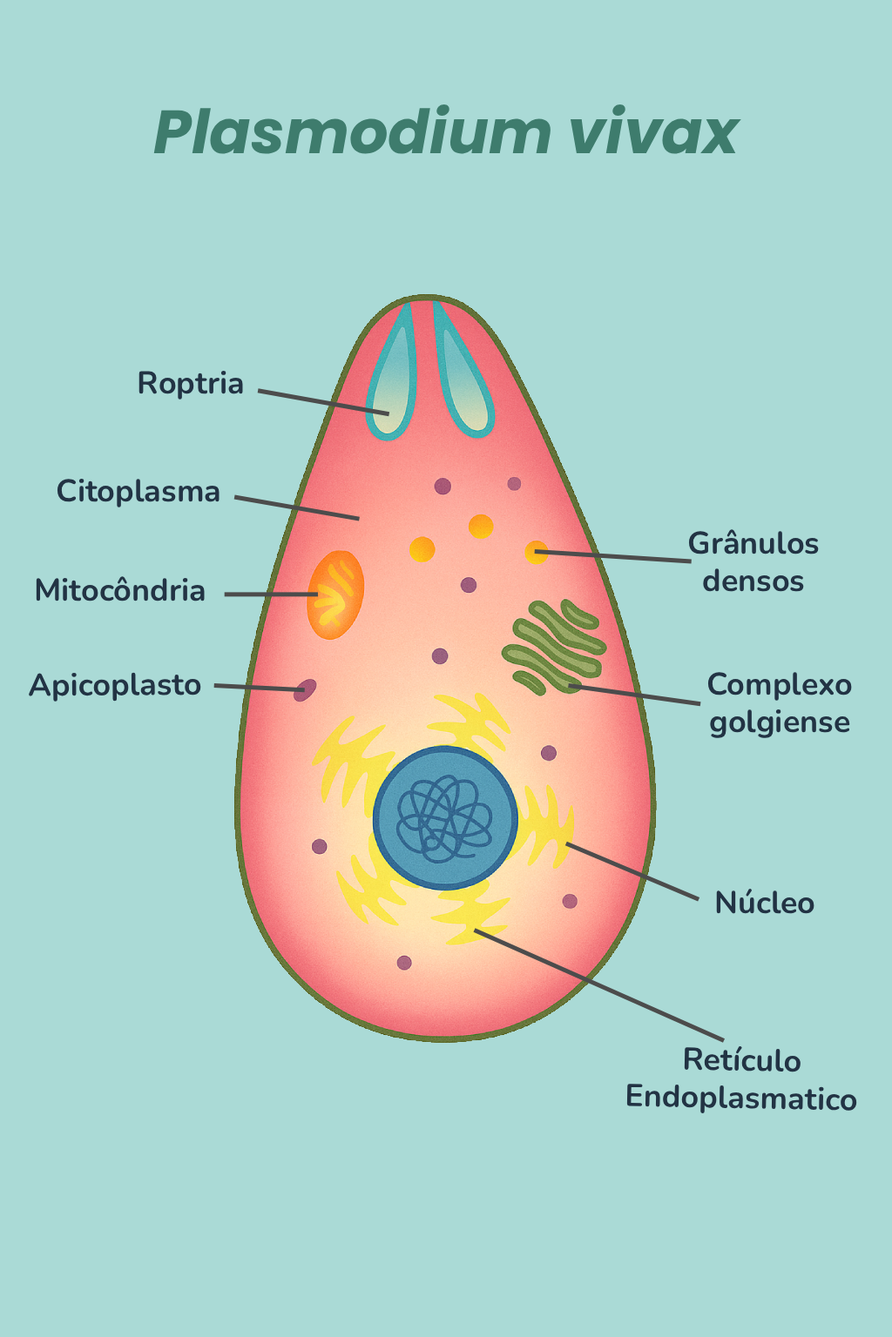
<style>
.page{position:relative;width:892px;height:1337px;background:#aadad6}
.page>*{position:absolute;margin:0}
.t1{font:60.9px "Poppins-BoldItalic";color:#3e7c6d}
.t2{font:31.3px "Nunito-Bold";color:#223344}
</style>
<div class="page">
<p class="t1" style="left:153px;top:104px;width:588px;height:50px">Plasmodium vivax</p>
<p class="t2" style="left:138px;top:371px;width:105px;height:29px">Roptria</p>
<p class="t2" style="left:57px;top:479px;width:162px;height:29px">Citoplasma</p>
<p class="t2" style="left:688px;top:529px;width:130px;height:63px;text-align:center">Grânulos densos</p>
<p class="t2" style="left:36px;top:576px;width:169px;height:26px">Mitocôndria</p>
<p class="t2" style="left:28px;top:672px;width:173px;height:30px">Apicoplasto</p>
<p class="t2" style="left:707px;top:672px;width:145px;height:66px;text-align:center">Complexo golgiense</p>
<p class="t2" style="left:716px;top:888px;width:98px;height:26px">Núcleo</p>
<p class="t2" style="left:626px;top:1046px;width:231px;height:68px;text-align:center;rotate:1deg">Retículo <br>Endoplasmatico</p>
</div>
